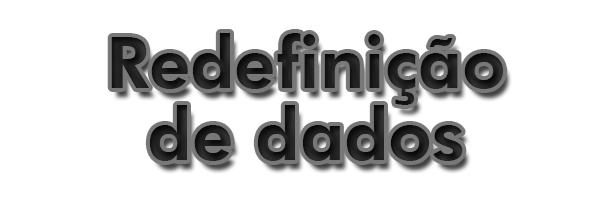
<style>
.page{position:relative;width:600px;height:200px;background:#ffffff}
.page>*{position:absolute;margin:0}
.t1{font:72px/36px "FuturaBT-Heavy";color:#1d1d1d}
</style>
<div class="page">
<p class="t1" style="left:111px;top:33px;width:393px;height:128px;text-align:center">Redefinição<br><br>de dados</p>
</div>
